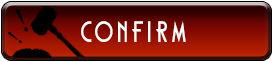
<style>
.page{position:relative;width:273px;height:62px}
.page>*{position:absolute;margin:0}
.t1{font:34px "Georgia";letter-spacing:0.18em;color:#000000;scale:0.84 1}
.t2{font:26px "DKCarambola";letter-spacing:0.18em;color:#ffffff;scale:0.84 1}
.t3{font:23.3px "Georgia";letter-spacing:0.18em;color:#000000;scale:0.84 1}
</style>
<div class="page">
<p class="t1" style="left:16px;top:8px;width:12px;height:24px;rotate:-24deg">!</p>
<p class="t2" style="left:81px;top:21px;width:105px;height:21px">Confirm</p>
<p class="t3" style="left:8px;top:31px;width:14px;height:13px;rotate:-52deg">!</p>
</div>
